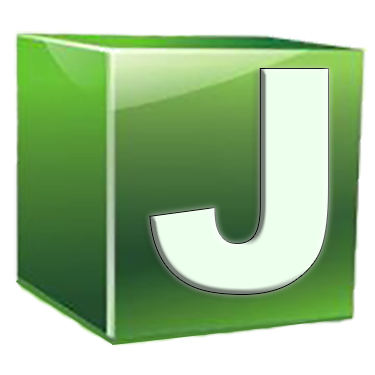
<style>
.page{position:relative;width:375px;height:375px;background:#ffffff}
.page>*{position:absolute;margin:0}
.t1{font:312.5px "Arial-Black";color:#edffed}
</style>
<div class="page">
<p class="t1" style="left:149px;top:68px;width:180px;height:227px">J</p>
</div>
